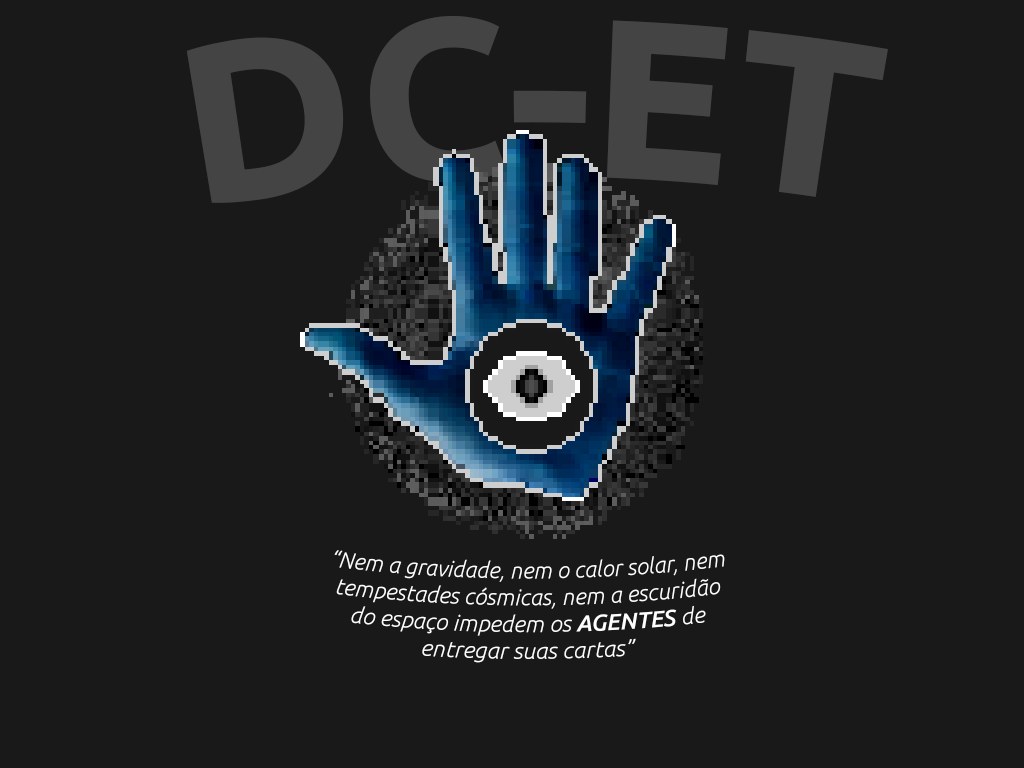
<style>
.page{position:relative;width:1024px;height:768px;background:#191919}
.page>*{position:absolute;margin:0}
.t1{font:224.5px "Ubuntu-Bold";color:#444444}
.t2{font:22.3px "Ubuntu-LightItalic";color:#ffffff}
.t3{font:22.3px "Ubuntu-MediumItalic";color:#ffffff}
</style>
<div class="page">
<p class="t1" style="left:186px;top:16px;width:702px;height:187px">DC-ET</p>
<p class="t2" style="left:334px;top:550px;width:391px;height:113px;text-align:center">“Nem a gravidade, nem o calor solar, nem<br>tempestades cósmicas, nem a escuridão<br>do espaço impedem os <span class="t3">AGENTES</span> de<br>entregar suas cartas”</p>
</div>
